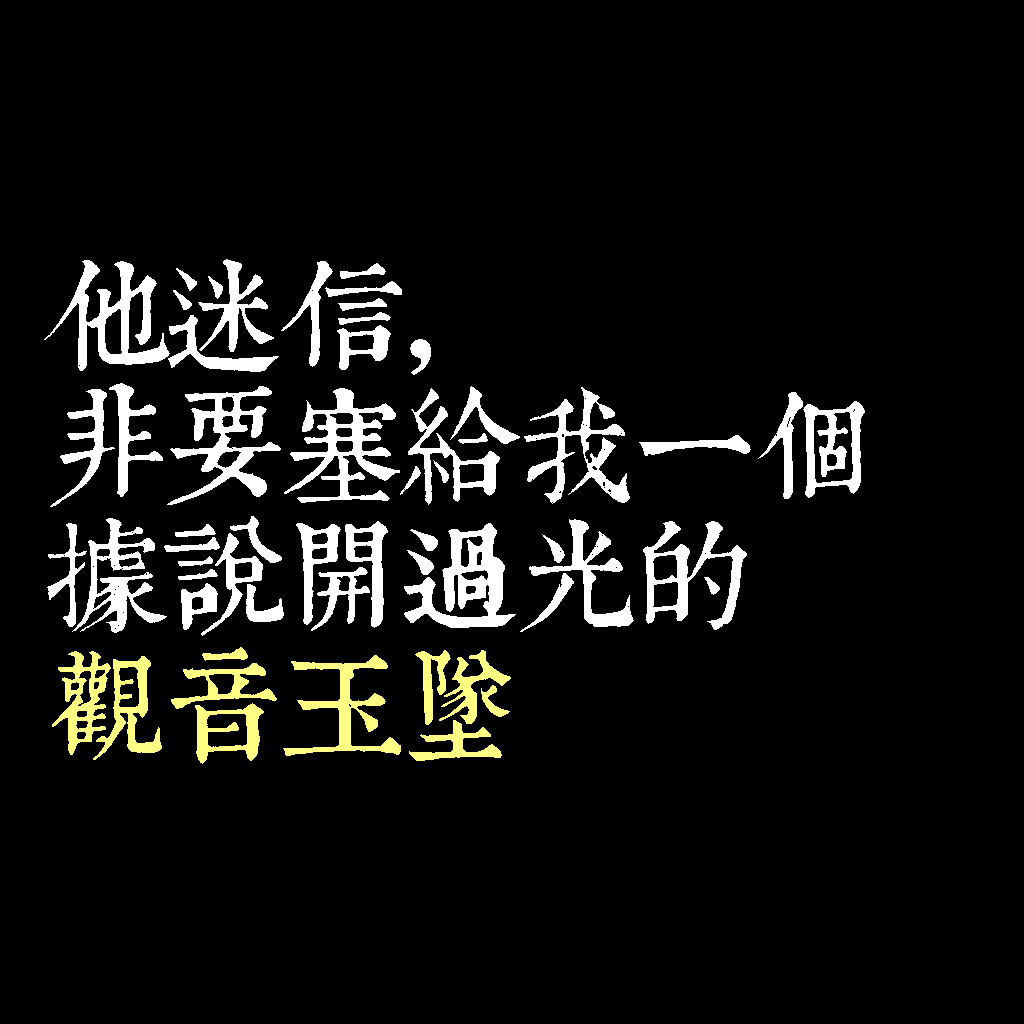
<style>
.page{position:relative;width:1024px;height:1024px;background:#000000}
.page>*{position:absolute;margin:0}
.t1{font:120px/130px "TpldKhangXiDictTrial";letter-spacing:-0.02em;color:#ffffff}
.t2{font:120px/130px "TpldKhangXiDictTrial";letter-spacing:-0.02em;color:#fffd84}
</style>
<div class="page">
<p class="t1" style="left:44px;top:259px;width:821px;height:505px">他迷信，<br>非要塞給我一個<br>據說開過光的<br><span class="t2">觀音玉墜</span></p>
</div>
